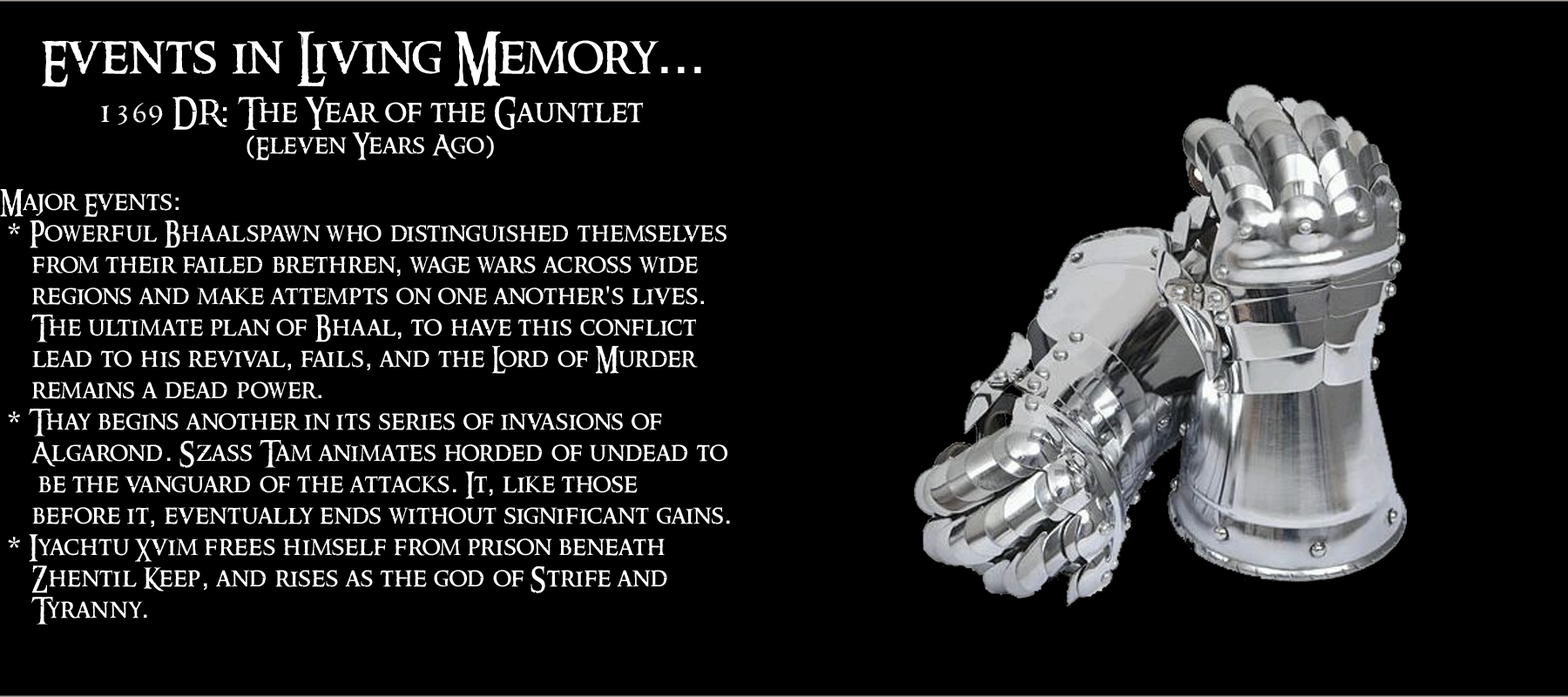
<style>
.page{position:relative;width:1568px;height:697px;background:#000000}
.page>*{position:absolute;margin:0}
.t1{font:26.1px "RingbearerMedium";letter-spacing:0.025em;color:#ffffff}
.t2{font:15.7px "RingbearerMedium";letter-spacing:0.025em;color:#ffffff}
.t3{font:52.3px "RingbearerMedium";letter-spacing:0.025em;color:#ffffff}
.t4{font:52.3px "Rockwell";letter-spacing:0.025em;color:#ffffff}
.t5{font:31.4px "RingbearerMedium";letter-spacing:0.025em;color:#ffffff}
.t6{font:31.4px "Rockwell";letter-spacing:0.025em;color:#ffffff}
.t7{font:26.1px "Rockwell";letter-spacing:0.025em;color:#ffffff}
</style>
<div class="page">
<p class="t1" style="left:0px;top:31px;width:730px;height:594px;text-align:center"><span class="t2"><br></span><span class="t3">Events in Living Memory</span><span class="t4">...<br><br></span><span class="t5">1369 DR</span><span class="t6">:</span><span class="t5"> The Year of the Gauntlet<br></span><span class="t7">(</span>Eleven Years Ago<span class="t7">)<br><br></span>Major Events<span class="t7">:<br> * </span>Powerful Bhaalspawn who distinguished themselves <br> from their failed brethren<span class="t7">,</span> wage wars across wide <br> regions and make attempts on one another<span class="t7">'</span>s lives<span class="t7">.</span> <br> The ultimate plan of Bhaal<span class="t7">,</span> to have this conflict <br> lead to his revival<span class="t7">,</span> fails<span class="t7">,</span> and the Lord of Murder <br> remains a dead power<span class="t7">.<br> * </span>Thay begins another in its series of invasions of <br> Algarond<span class="t7">.</span> Szass Tam animates horded of undead to<br>  be the vanguard of the attacks<span class="t7">.</span> It<span class="t7">,</span> like those <br> before it<span class="t7">,</span> eventually ends without significant gains<span class="t7">.<br> * </span>Iyachtu Xvim frees himself from prison beneath <br> Zhentil Keep<span class="t7">,</span> and rises as the god of Strife and <br> Tyranny<span class="t7">.</span></p>
</div>
